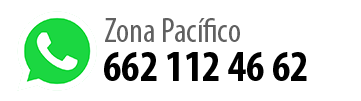
<style>
.page{position:relative;width:361px;height:101px;background:#ffffff}
.page>*{position:absolute;margin:0}
.t1{font:34.5px "MyriadPro-Cond";color:#606060}
.t2{font:43.5px "MyriadPro-BoldCond";color:#000000}
</style>
<div class="page">
<p class="t1" style="left:105px;top:18px;width:135px;height:24px">Zona Pacífico</p>
<p class="t2" style="left:104px;top:52px;width:203px;height:29px">662 112 46 62</p>
</div>
